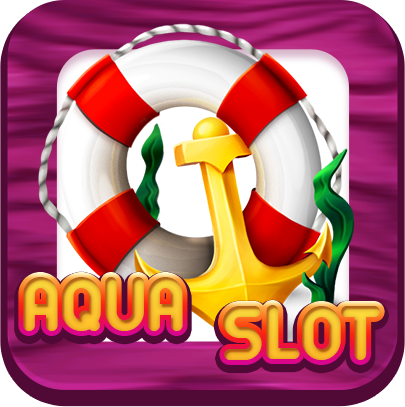
<style>
.page{position:relative;width:405px;height:407px}
.page>*{position:absolute;margin:0}
.t1{font:85.4px "Arista";text-transform:uppercase}
</style>
<div class="page">
<p class="t1" style="left:23px;top:277px;width:160px;height:54px">aqua</p>
<p class="t1" style="left:223px;top:305px;width:157px;height:55px">slot</p>
</div>
